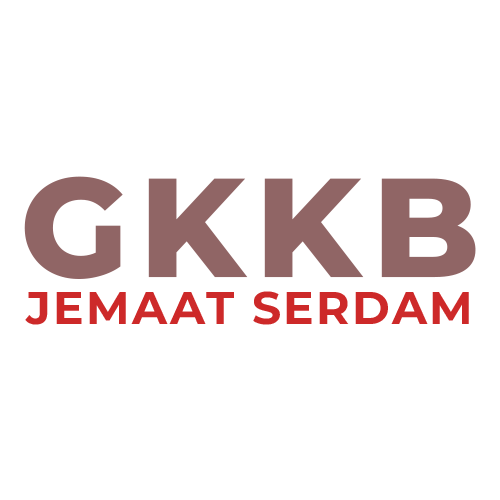
<style>
.page{position:relative;width:500px;height:500px;background:#ffffff}
.page>*{position:absolute;margin:0}
.t1{font:140.5px "Montserrat-ExtraBold";letter-spacing:0.075em;color:#906565}
.t2{font:45.7px "Montserrat-Bold";letter-spacing:0.05em;color:#cd2929}
</style>
<div class="page">
<p class="t1" style="left:24px;top:176px;width:452px;height:103px">GKKB</p>
<p class="t2" style="left:25px;top:291px;width:444px;height:34px">JEMAAT SERDAM</p>
</div>
